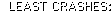
<style>
.page{position:relative;width:112px;height:12px;background:#ffffff}
.page>*{position:absolute;margin:0}
.t1{font:12px "Geneva";color:#000000}
</style>
<div class="page">
<p class="t1" style="left:10px;top:2px;width:101px;height:9px">LEAST CRASHES:</p>
</div>
